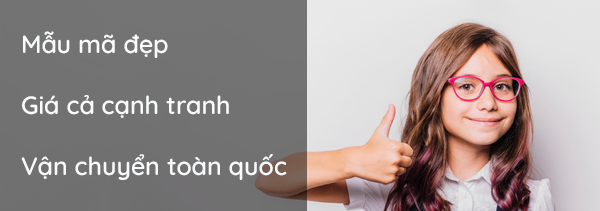
<style>
.page{position:relative;width:600px;height:211px}
.page>*{position:absolute;margin:0}
.t1{font:25px "Quicksand-SemiBold";color:#fafbfc}
</style>
<div class="page">
<p class="t1" style="left:23px;top:31px;width:145px;height:27px">Mẫu mã đẹp</p>
<p class="t1" style="left:22px;top:95px;width:207px;height:23px">Giá cả cạnh tranh</p>
<p class="t1" style="left:21px;top:154px;width:266px;height:26px">Vận chuyển toàn quốc</p>
</div>
